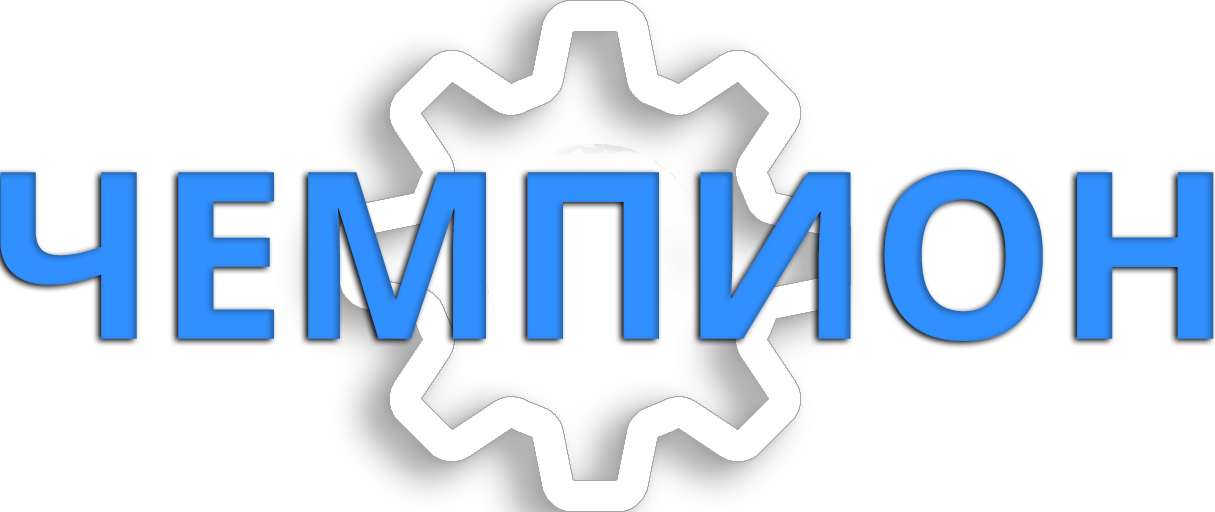
<style>
.page{position:relative;width:1215px;height:512px;background:#ffffff}
.page>*{position:absolute;margin:0}
.t1{font:232.7px "OpenSans-Bold";color:#3190ff}
</style>
<div class="page">
<p class="t1" style="left:0px;top:169px;width:1214px;height:172px">ЧЕМПИОН</p>
</div>
